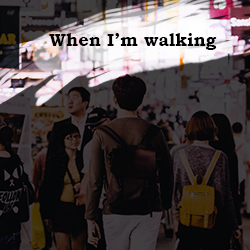
<style>
.page{position:relative;width:250px;height:250px}
.page>*{position:absolute;margin:0}
.t1{font:18px "BookmanOldStyle-Bold";color:#000000}
.t2{font:18px "CenturyGothic-Bold";color:#ffffff}
</style>
<div class="page">
<p class="t1" style="left:35px;top:33px;width:182px;height:17px">When I’m walking<span class="t2">...</span></p>
</div>
